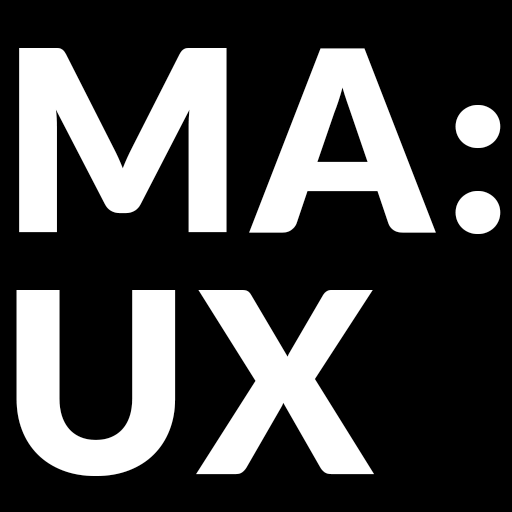
<style>
.page{position:relative;width:512px;height:512px;background:#000000}
.page>*{position:absolute;margin:0}
.t1{font:252.7px/242px "Lato-Black";letter-spacing:0.03em;color:#ffffff;text-transform:uppercase}
</style>
<div class="page">
<p class="t1" style="left:16px;top:48px;width:485px;height:428px">MA:<br>UX</p>
</div>
